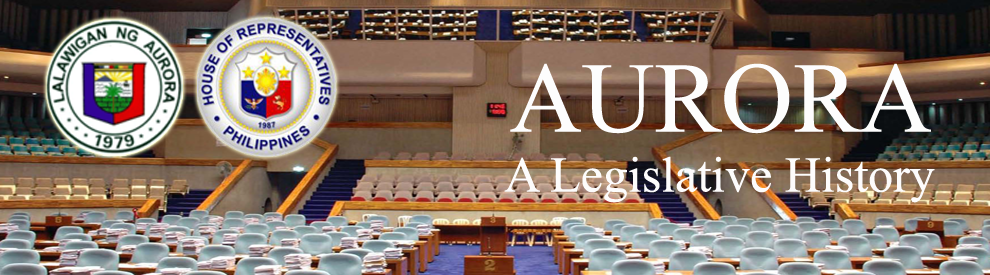
<style>
.page{position:relative;width:990px;height:275px}
.page>*{position:absolute;margin:0}
.t1{font:50px "TimesNewRomanPSMT";color:#fdfcfc}
.t2{font:100px "TimesNewRomanPSMT";color:#fdfdfd}
</style>
<div class="page">
<p class="t1" style="left:504px;top:63px;width:431px;height:140px;text-align:center"><span class="t2">AURORA<br></span>A Legislative History</p>
</div>
